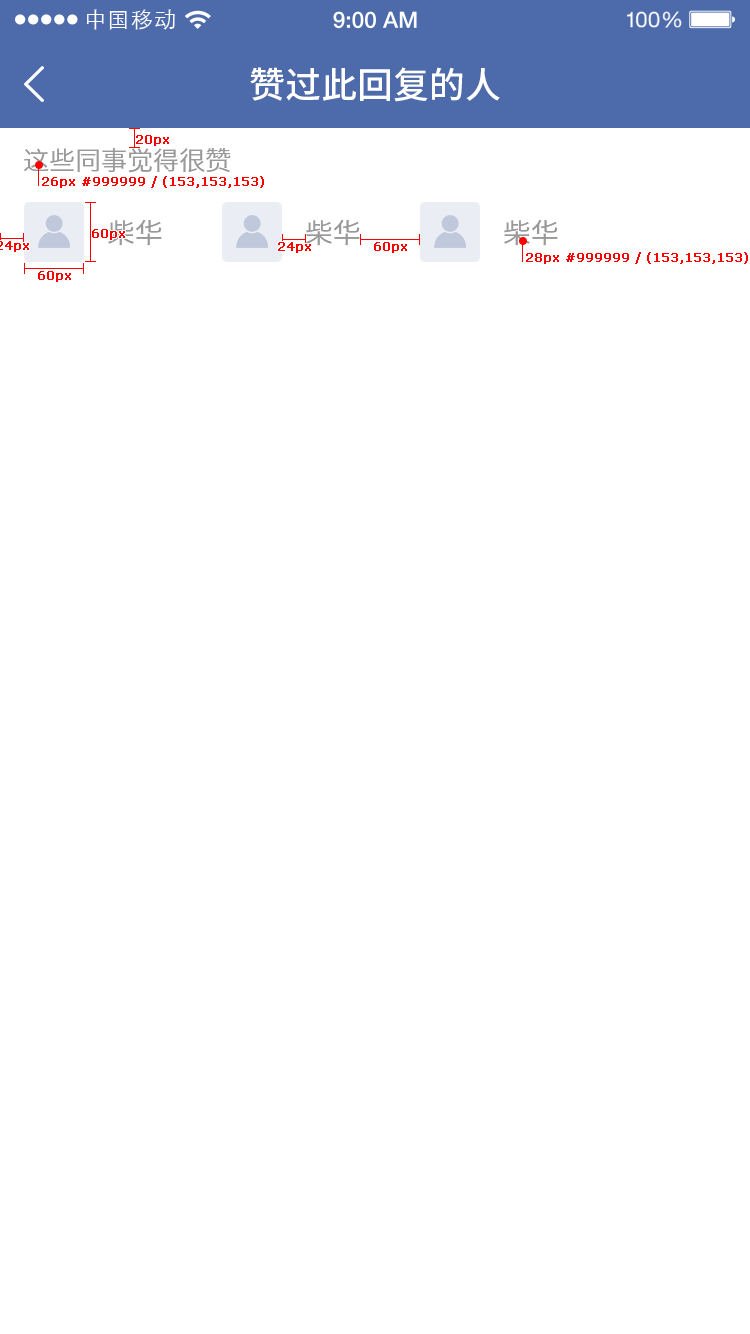
<style>
.page{position:relative;width:750px;height:1334px;background:#ffffff}
.page>*{position:absolute;margin:0}
.t1{font:21.9px "STXihei";letter-spacing:0.04em;color:#ffffff}
.t2{font:36px "NotoSansHans-Medium";color:#ffffff}
.t3{font:12px "Verdana";color:#ff0000;font-weight:bold}
.t4{font:26px "HiraginoSansGB-W3";color:#999999}
.t5{font:28px "HiraginoSansGB-W3";color:#999999}
</style>
<div class="page">
<p class="t1" style="left:86px;top:9px;width:89px;height:21px">中国移动</p>
<p class="t2" style="left:250px;top:67px;width:250px;height:35px">赞过此回复的人</p>
<p class="t3" style="left:136px;top:135px;width:33px;height:11px">20px</p>
<p class="t4" style="left:24px;top:148px;width:207px;height:25px">这些同事觉得很赞</p>
<p class="t3" style="left:42px;top:176px;width:222px;height:12px">26px #999999 / (153,153,153)</p>
<p class="t5" style="left:108px;top:219px;width:54px;height:27px">柴华</p>
<p class="t5" style="left:306px;top:219px;width:54px;height:27px">柴华</p>
<p class="t5" style="left:504px;top:219px;width:54px;height:27px">柴华</p>
<p class="t3" style="left:92px;top:229px;width:33px;height:11px">60px</p>
<p class="t3" style="left:278px;top:242px;width:33px;height:11px">24px</p>
<p class="t3" style="left:374px;top:242px;width:33px;height:11px">60px</p>
<p class="t3" style="left:526px;top:252px;width:222px;height:12px">28px #999999 / (153,153,153)</p>
<p class="t3" style="left:38px;top:271px;width:33px;height:11px">60px</p>
</div>
